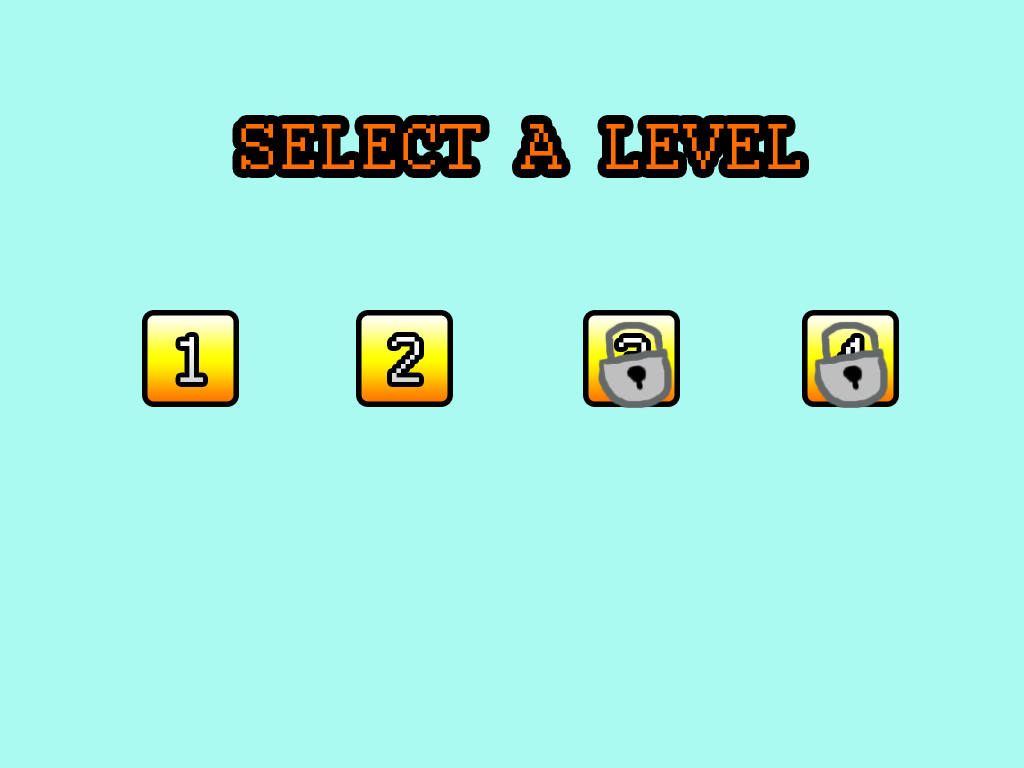
<style>
.page{position:relative;width:1024px;height:768px;background:#aafaf1}
.page>*{position:absolute;margin:0}
.t1{font:72px "Courier";color:#ff6d01}
</style>
<div class="page">
<p class="t1" style="left:241px;top:124px;width:559px;height:45px">SELECT A LEVEL</p>
</div>
